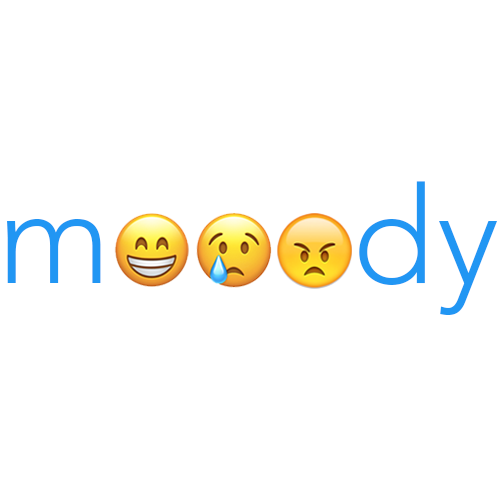
<style>
.page{position:relative;width:500px;height:500px;background:#ffffff}
.page>*{position:absolute;margin:0}
.t1{font:133.8px "Avenir-Light"}
.t2{font:133.8px "Avenir-Light";letter-spacing:0.025em}
</style>
<div class="page">
<p class="t1" style="left:7px;top:181px;width:491px;height:134px"><span class="t2">m</span>ooo<span class="t2">dy</span></p>
</div>
